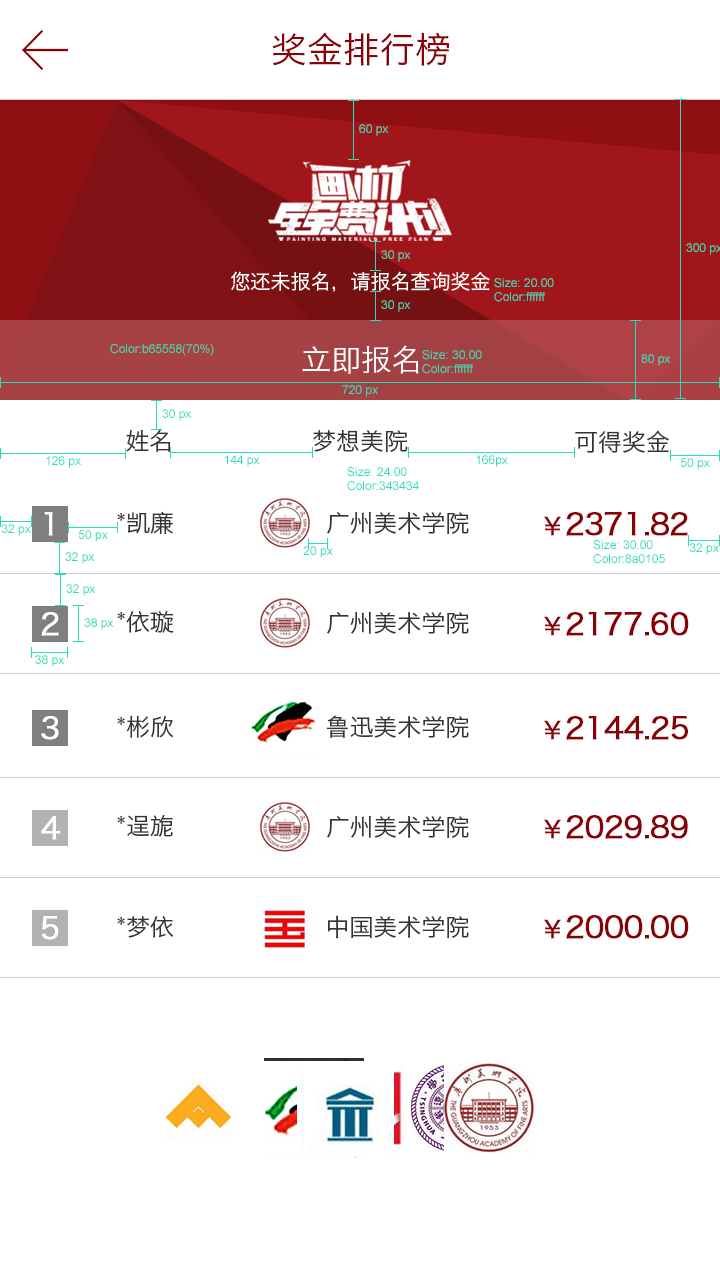
<style>
.page{position:relative;width:720px;height:1280px;background:#ffffff}
.page>*{position:absolute;margin:0}
.t1{font:36px "HiraginoSansGB-W3";color:#8a0105}
.t2{font:12px "ArialMT";color:#28ddb9}
.t3{font:20px "HiraginoSansGB-W3";color:#ffffff}
.t4{font:30px "HiraginoSansGB-W3";color:#ffffff}
.t5{font:24px "HiraginoSansGB-W3";color:#343434}
.t6{font:30px "HiraginoSansGB-W3";color:#ffffff;font-weight:bold}
.t7{font:30px "HiraginoSansGB-W3";letter-spacing:-0.034em;color:#8a0105;font-weight:bold}
.t8{font:24px "HiraginoSansGB-W3";letter-spacing:-0.034em;color:#8a0105;font-weight:bold}
</style>
<div class="page">
<p class="t1" style="left:272px;top:32px;width:177px;height:34px">奖金排行榜</p>
<p class="t2" style="left:359px;top:124px;width:30px;height:12px">60 px</p>
<p class="t2" style="left:686px;top:243px;width:36px;height:12px">300 px</p>
<p class="t2" style="left:381px;top:250px;width:30px;height:12px">30 px</p>
<p class="t3" style="left:231px;top:271px;width:259px;height:21px">您还未报名，请报名查询奖金</p>
<p class="t2" style="left:494px;top:278px;width:60px;height:24px">Size: 20.00<br>Color:ffffff</p>
<p class="t2" style="left:381px;top:300px;width:30px;height:12px">30 px</p>
<p class="t2" style="left:110px;top:344px;width:104px;height:12px">Color:b65558(70%)</p>
<p class="t4" style="left:302px;top:345px;width:117px;height:29px">立即报名</p>
<p class="t2" style="left:422px;top:350px;width:60px;height:24px">Size: 30.00<br>Color:ffffff</p>
<p class="t2" style="left:641px;top:354px;width:30px;height:12px">80 px</p>
<p class="t2" style="left:342px;top:385px;width:36px;height:12px">720 px</p>
<p class="t2" style="left:162px;top:409px;width:30px;height:12px">30 px</p>
<p class="t5" style="left:126px;top:429px;width:45px;height:23px">姓名</p>
<p class="t5" style="left:313px;top:430px;width:95px;height:22px">梦想美院</p>
<p class="t5" style="left:575px;top:430px;width:94px;height:23px">可得奖金</p>
<p class="t2" style="left:46px;top:456px;width:35px;height:12px">126 px</p>
<p class="t2" style="left:224px;top:455px;width:36px;height:12px">144 px</p>
<p class="t2" style="left:476px;top:455px;width:32px;height:12px">166px</p>
<p class="t2" style="left:680px;top:458px;width:30px;height:12px">50 px</p>
<p class="t2" style="left:347px;top:467px;width:72px;height:24px">Size: 24.00<br>Color:343434</p>
<p class="t6" style="left:44px;top:512px;width:9px;height:24px">1</p>
<p class="t5" style="left:117px;top:511px;width:56px;height:23px">*凯廉</p>
<p class="t5" style="left:327px;top:511px;width:142px;height:23px">广州美术学院</p>
<p class="t7" style="left:544px;top:511px;width:144px;height:25px"><span class="t8">￥</span>2371.82</p>
<p class="t2" style="left:1px;top:524px;width:30px;height:12px">32 px</p>
<p class="t2" style="left:78px;top:530px;width:30px;height:12px">50 px</p>
<p class="t2" style="left:593px;top:540px;width:72px;height:24px">Size: 30.00<br>Color:8a0105</p>
<p class="t2" style="left:689px;top:543px;width:30px;height:12px">32 px</p>
<p class="t2" style="left:65px;top:552px;width:30px;height:12px">32 px</p>
<p class="t2" style="left:303px;top:546px;width:30px;height:12px">20 px</p>
<p class="t2" style="left:66px;top:584px;width:30px;height:12px">32 px</p>
<p class="t6" style="left:41px;top:612px;width:18px;height:24px">2</p>
<p class="t5" style="left:117px;top:610px;width:57px;height:23px">*依璇</p>
<p class="t5" style="left:327px;top:611px;width:142px;height:23px">广州美术学院</p>
<p class="t7" style="left:544px;top:611px;width:145px;height:25px"><span class="t8">￥</span>2177.60</p>
<p class="t2" style="left:84px;top:618px;width:30px;height:12px">38 px</p>
<p class="t2" style="left:35px;top:655px;width:30px;height:12px">38 px</p>
<p class="t6" style="left:41px;top:716px;width:18px;height:24px">3</p>
<p class="t5" style="left:117px;top:715px;width:57px;height:23px">*彬欣</p>
<p class="t5" style="left:326px;top:715px;width:143px;height:23px">鲁迅美术学院</p>
<p class="t7" style="left:544px;top:716px;width:144px;height:24px"><span class="t8">￥</span>2144.25</p>
<p class="t6" style="left:41px;top:816px;width:20px;height:24px">4</p>
<p class="t5" style="left:117px;top:814px;width:56px;height:23px">*逞旎</p>
<p class="t5" style="left:327px;top:815px;width:142px;height:23px">广州美术学院</p>
<p class="t7" style="left:544px;top:815px;width:144px;height:24px"><span class="t8">￥</span>2029.89</p>
<p class="t6" style="left:41px;top:916px;width:18px;height:24px">5</p>
<p class="t5" style="left:117px;top:916px;width:57px;height:22px">*梦依</p>
<p class="t5" style="left:327px;top:915px;width:142px;height:24px">中国美术学院</p>
<p class="t7" style="left:544px;top:915px;width:145px;height:24px"><span class="t8">￥</span>2000.00</p>
</div>
